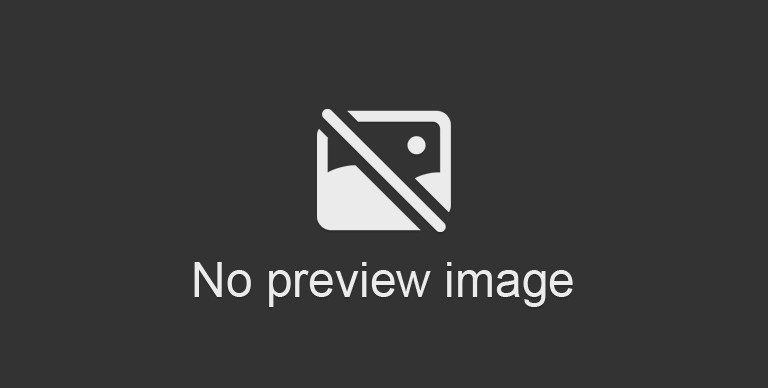
<style>
.page{position:relative;width:768px;height:388px;background:#333333}
.page>*{position:absolute;margin:0}
.t1{font:48px "ArialMT";color:#ebebeb}
</style>
<div class="page">
<p class="t1" style="left:194px;top:262px;width:379px;height:45px">No preview image</p>
</div>
